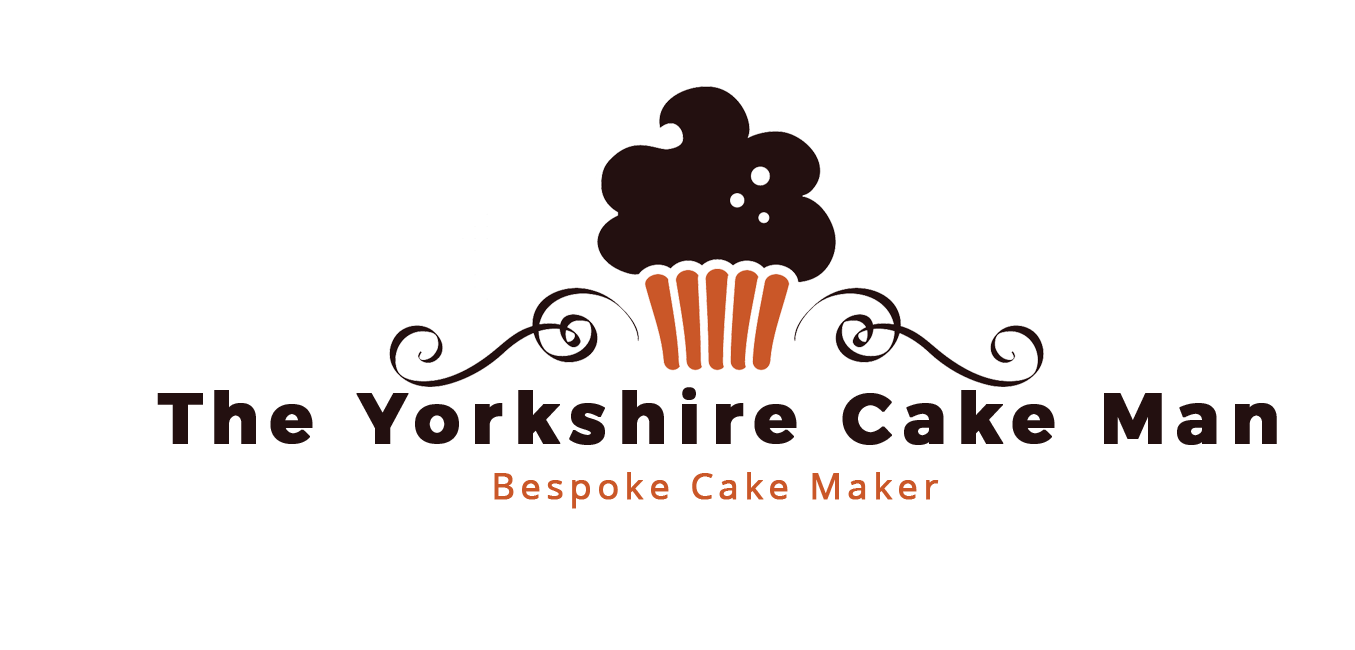
<style>
.page{position:relative;width:1355px;height:650px;background:#ffffff}
.page>*{position:absolute;margin:0}
.t1{font:72px "Montserrat-Bold";letter-spacing:0.13em;color:#231010;font-weight:bold}
.t2{font:36px "OpenSans";letter-spacing:0.13em;color:#ca5728;font-weight:bold}
</style>
<div class="page">
<p class="t1" style="left:157px;top:387px;width:1120px;height:58px">The Yorkshire Cake Man</p>
<p class="t2" style="left:494px;top:472px;width:445px;height:37px">Bespoke Cake Maker</p>
</div>
